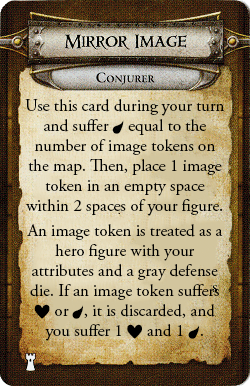
<style>
.page{position:relative;width:250px;height:386px}
.page>*{position:absolute;margin:0}
.t1{font:17px/20px "AGaramondPro-Regular";color:#000000}
.t2{font:14px/20px "DescentSymbols";color:#000000}
</style>
<div class="page">
<p class="t1" style="left:25px;top:99px;width:199px;height:242px;text-align:center">Use this card during your turn and suffer <span class="t2">f</span> equal to the number of image tokens on the map. Then, place 1 image token in an empty space within 2 spaces of your figure.<br>An image token is treated as a hero figure with your attributes and a gray defense die. If an image token suffers <span class="t2">h</span> or <span class="t2">f</span>, it is discarded, and you suffer 1 <span class="t2">h</span> and 1 <span class="t2">f</span>.</p>
</div>
